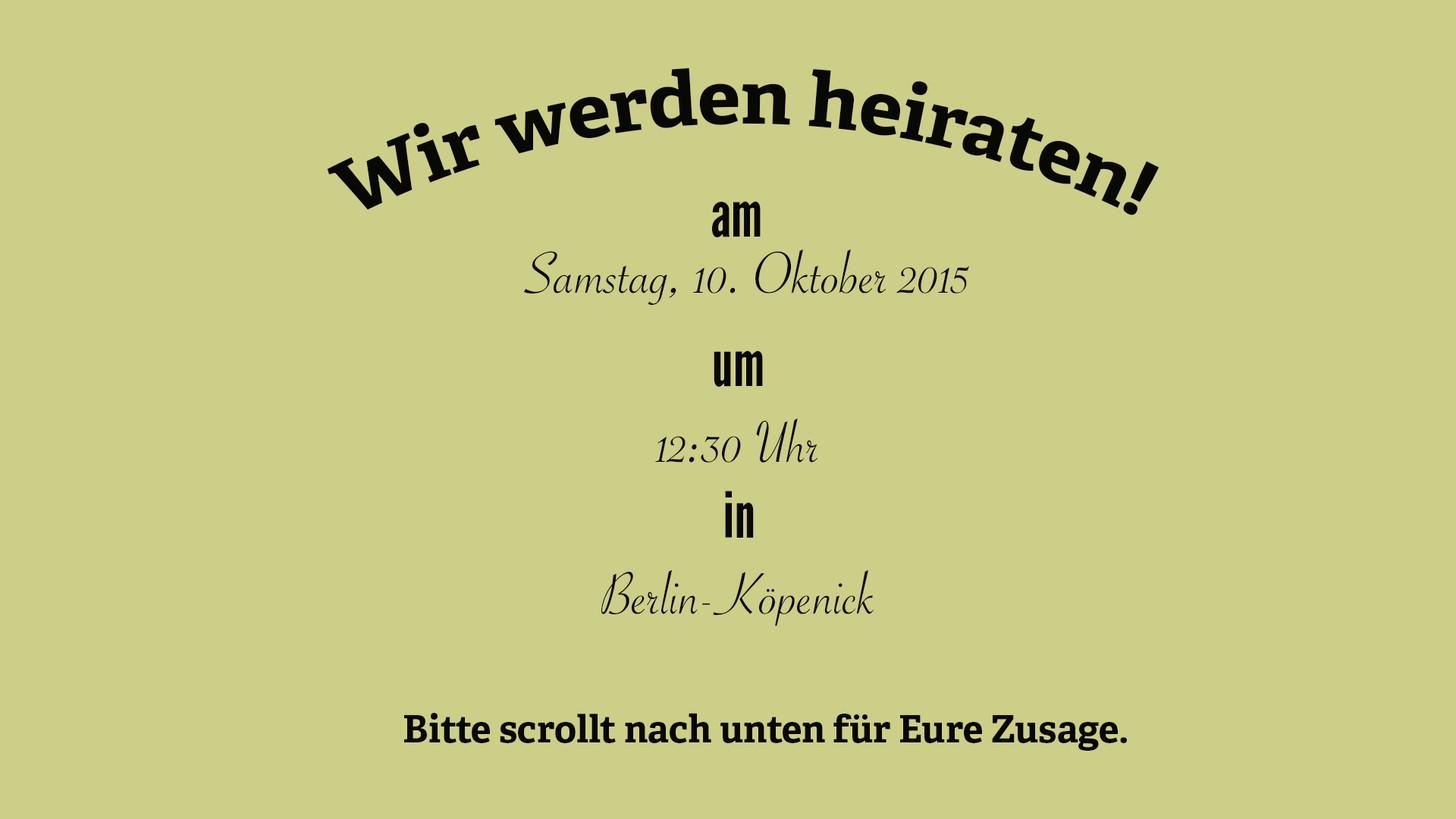
<style>
.page{position:relative;width:1456px;height:819px;background:#cdce88}
.page>*{position:absolute;margin:0}
.t1{font:75.8px "AdelleBasic-Bold";color:#080804}
.t2{font:63.2px "LeagueGothic-Regular";color:#080804}
.t3{font:63.2px "SavoyeLetPlain";color:#080804}
.t4{font:37.9px "AdelleBasic-Bold";color:#080804}
</style>
<div class="page">
<p class="t1" style="left:327px;top:67px;width:832px;height:148px">Wir werden heiraten!</p>
<p class="t2" style="left:712px;top:201px;width:49px;height:36px">am</p>
<p class="t3" style="left:524px;top:249px;width:445px;height:56px">Samstag, 10. Oktober 2015</p>
<p class="t3" style="left:601px;top:350px;width:273px;height:276px;text-align:center"><span class="t2">um<br></span>12:30 Uhr<br><span class="t2">in<br></span>Berlin-Köpenick</p>
<p class="t4" style="left:404px;top:713px;width:723px;height:38px">Bitte scrollt nach unten für Eure Zusage.</p>
</div>
